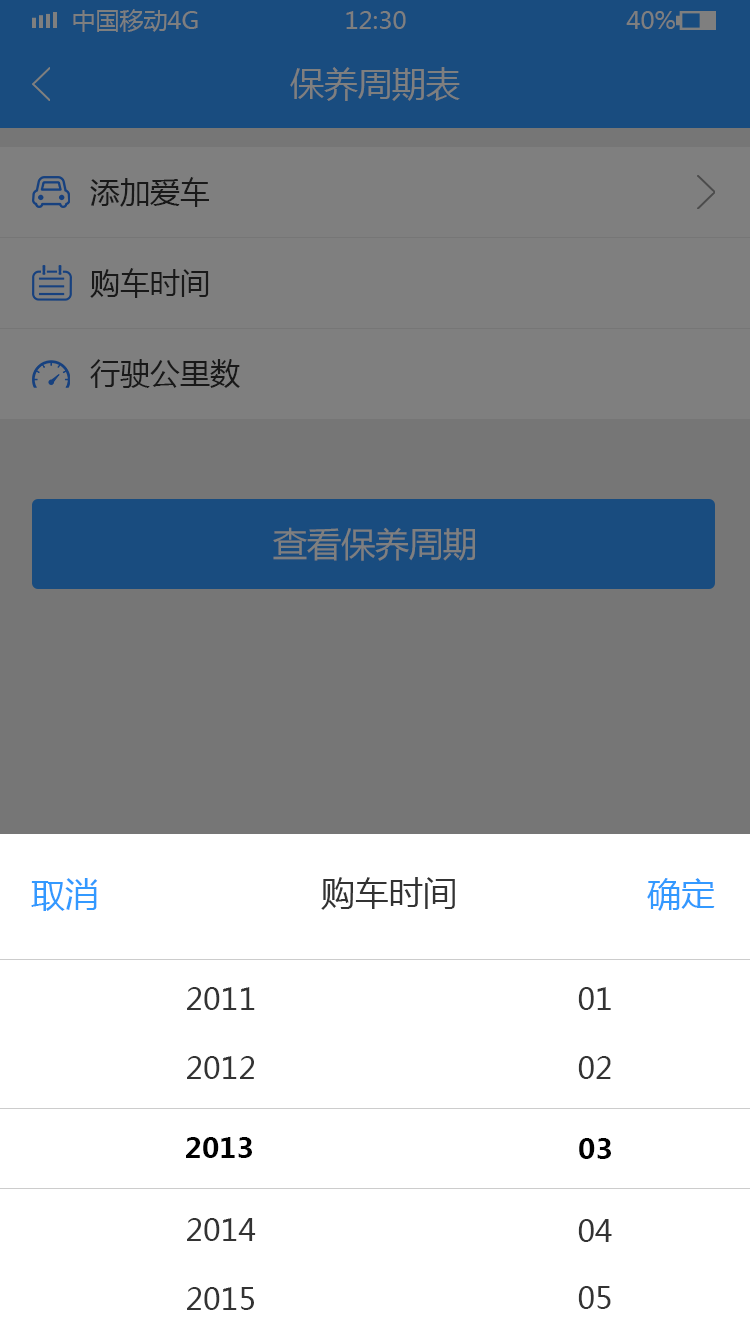
<style>
.page{position:relative;width:750px;height:1334px;background:#ffffff}
.page>*{position:absolute;margin:0}
.t1{font:24px "MicrosoftYaHei";color:#7f7f7f;text-transform:uppercase}
.t2{font:34px "MicrosoftYaHei";color:#7f7f7f}
.t3{font:30px "MicrosoftYaHei";color:#191919}
.t4{font:34px "MicrosoftYaHei";color:#3399ff}
.t5{font:34px "MicrosoftYaHei";color:#333333}
.t6{font:30px "MicrosoftYaHei";color:#333333}
.t7{font:28px "MicrosoftYaHei-Bold";color:#000000}
</style>
<div class="page">
<p class="t1" style="left:73px;top:9px;width:125px;height:23px">中国移动4G</p>
<p class="t1" style="left:346px;top:11px;width:60px;height:18px">12:30</p>
<p class="t1" style="left:626px;top:11px;width:49px;height:18px">40%</p>
<p class="t2" style="left:290px;top:67px;width:170px;height:34px">保养周期表</p>
<p class="t3" style="left:90px;top:177px;width:119px;height:30px">添加爱车</p>
<p class="t3" style="left:90px;top:268px;width:119px;height:30px">购车时间</p>
<p class="t3" style="left:90px;top:359px;width:150px;height:29px">行驶公里数</p>
<p class="t2" style="left:273px;top:527px;width:202px;height:34px">查看保养周期</p>
<p class="t4" style="left:31px;top:878px;width:67px;height:33px">取消</p>
<p class="t5" style="left:321px;top:877px;width:134px;height:33px">购车时间</p>
<p class="t4" style="left:647px;top:878px;width:68px;height:33px">确定</p>
<p class="t6" style="left:187px;top:987px;width:68px;height:23px">2011</p>
<p class="t6" style="left:578px;top:987px;width:33px;height:23px">01</p>
<p class="t6" style="left:187px;top:1056px;width:67px;height:23px">2012</p>
<p class="t6" style="left:578px;top:1056px;width:33px;height:23px">02</p>
<p class="t7" style="left:186px;top:1137px;width:66px;height:21px">2013</p>
<p class="t7" style="left:579px;top:1138px;width:32px;height:21px">03</p>
<p class="t6" style="left:187px;top:1218px;width:69px;height:23px">2014</p>
<p class="t6" style="left:578px;top:1219px;width:34px;height:23px">04</p>
<p class="t6" style="left:187px;top:1287px;width:67px;height:23px">2015</p>
<p class="t6" style="left:578px;top:1286px;width:33px;height:23px">05</p>
</div>
